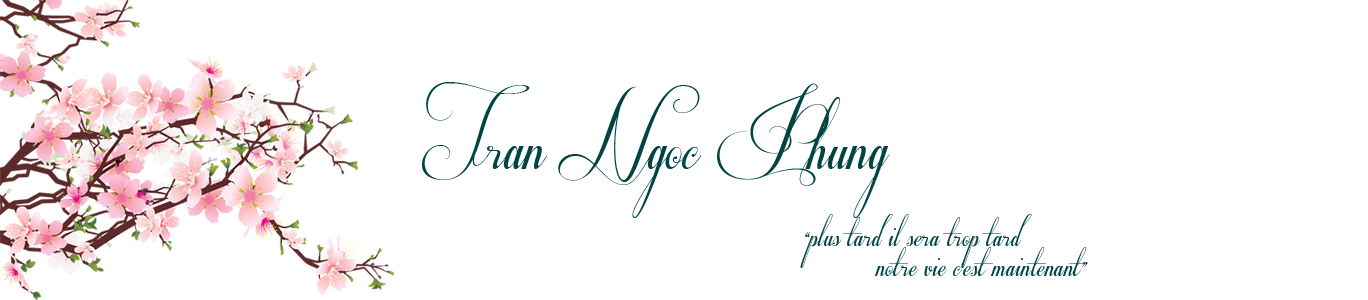
<style>
.page{position:relative;width:1368px;height:300px;background:#ffffff}
.page>*{position:absolute;margin:0}
.t1{font:80px "Respective";color:#014444}
.t2{font:36px/30px "Respective";letter-spacing:0.005em;color:#014444}
</style>
<div class="page">
<p class="t1" style="left:422px;top:82px;width:468px;height:136px">Tran Ngoc Phung</p>
<p class="t2" style="left:800px;top:214px;width:288px;height:63px">“plus tard il sera trop tard<br>  notre vie c’est maintenant”</p>
</div>
